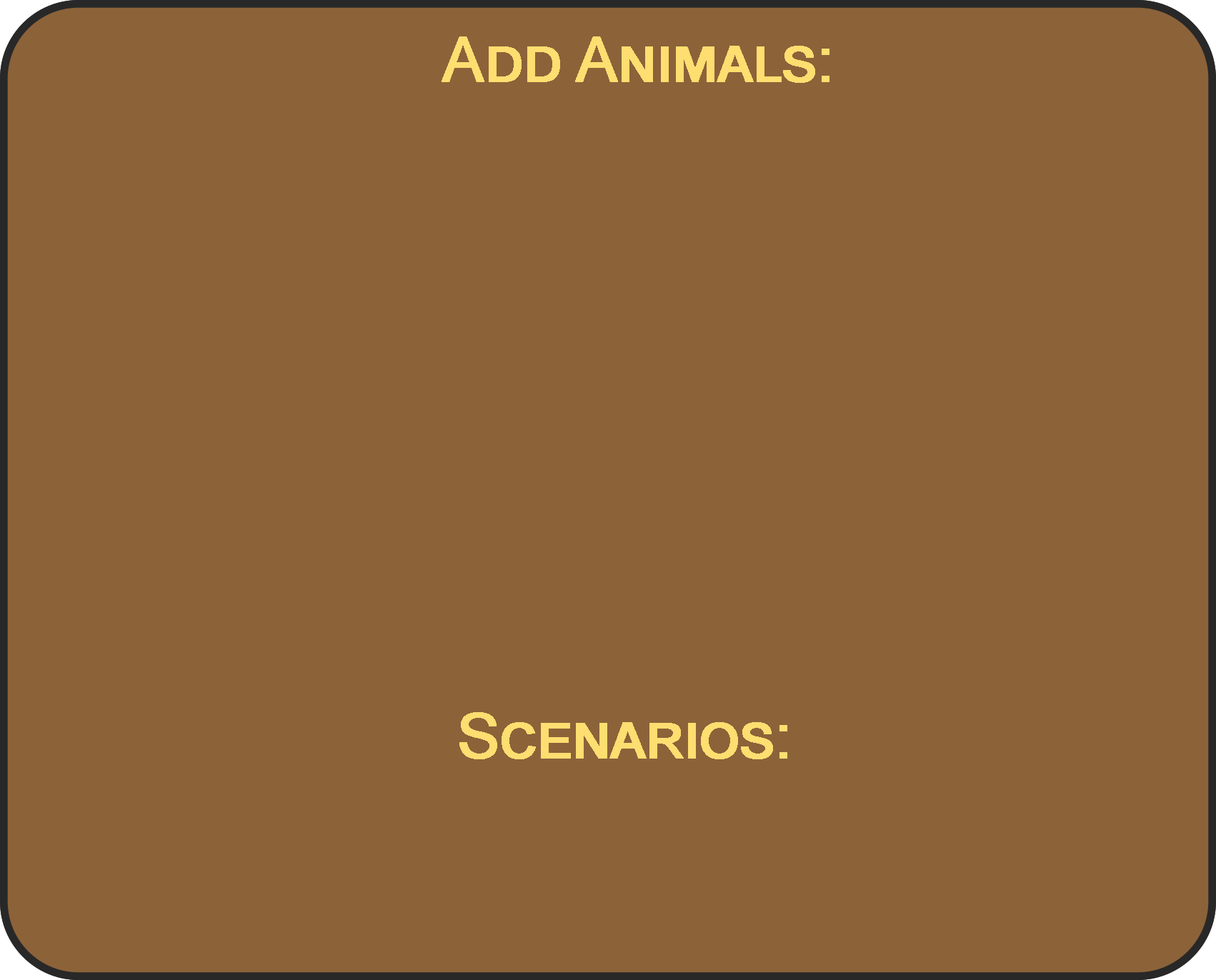
<style>
.page{position:relative;width:1216px;height:980px;background:#8c6239}
.page>*{position:absolute;margin:0}
.t1{font:62.8px "ArialMT";letter-spacing:-0.025em;color:#fede70;font-variant:small-caps;font-weight:bold}
</style>
<div class="page">
<p class="t1" style="left:442px;top:36px;width:388px;height:47px">Add Animals:</p>
<p class="t1" style="left:459px;top:712px;width:328px;height:48px">Scenarios:</p>
</div>
